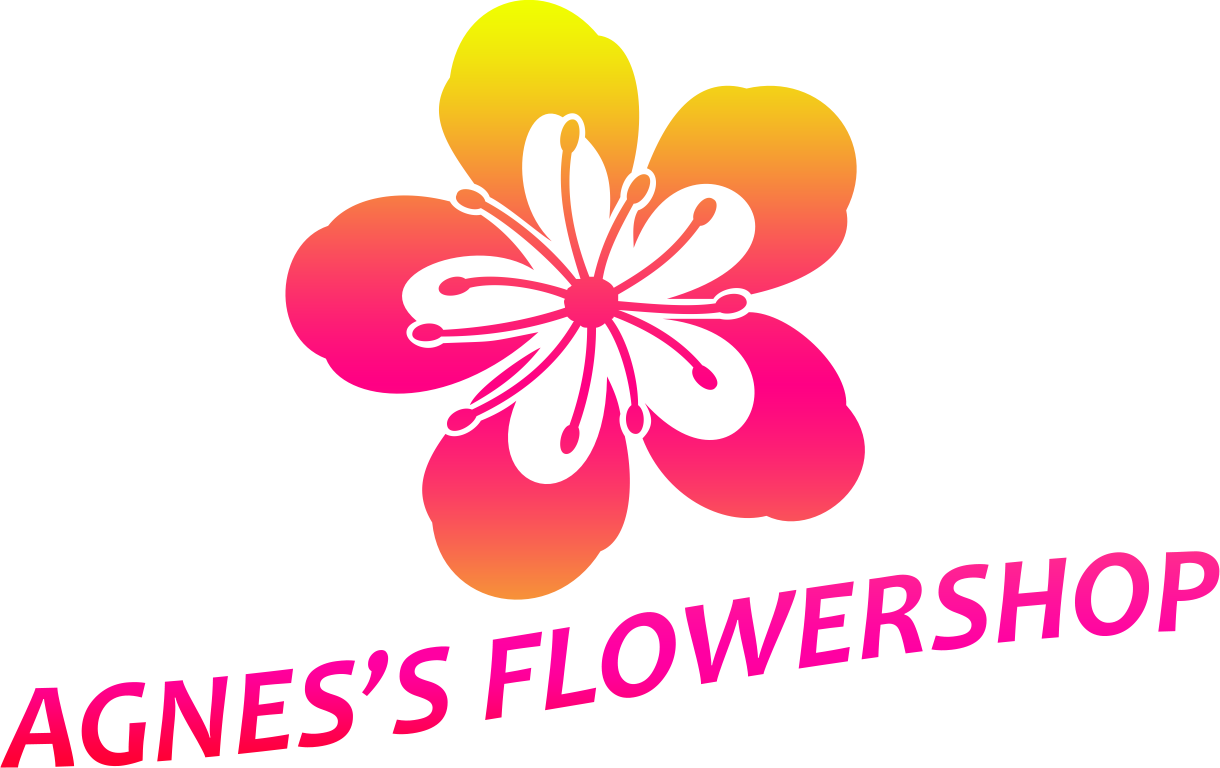
<style>
.page{position:relative;width:1220px;height:768px;background:#ffffff}
.page>*{position:absolute;margin:0}
.t1{font:125px "Candara-BoldItalic"}
</style>
<div class="page">
<p class="t1" style="left:0px;top:551px;width:1220px;height:217px;text-align:center">AGNES’S FLOWERSHOP</p>
</div>
